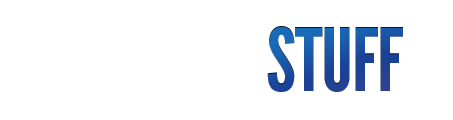
<style>
.page{position:relative;width:453px;height:120px;background:#ffffff}
.page>*{position:absolute;margin:0}
.t1{font:87.6px "LeagueGothic";letter-spacing:-0.015em;color:#1a4c9f;text-transform:uppercase}
</style>
<div class="page">
<p class="t1" style="left:267px;top:26px;width:136px;height:66px">Stuff</p>
</div>
